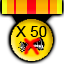
<style>
.page{position:relative;width:64px;height:64px}
.page>*{position:absolute;margin:0}
.t1{font:15px "ArialMT";color:#000000}
</style>
<div class="page">
<p class="t1" style="left:16px;top:26px;width:31px;height:11px">X 50</p>
</div>
